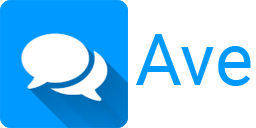
<style>
.page{position:relative;width:256px;height:128px;background:#ffffff}
.page>*{position:absolute;margin:0}
.t1{font:72px "Roboto-Regular";color:#0099ff}
</style>
<div class="page">
<p class="t1" style="left:136px;top:34px;width:115px;height:52px">Ave</p>
</div>
